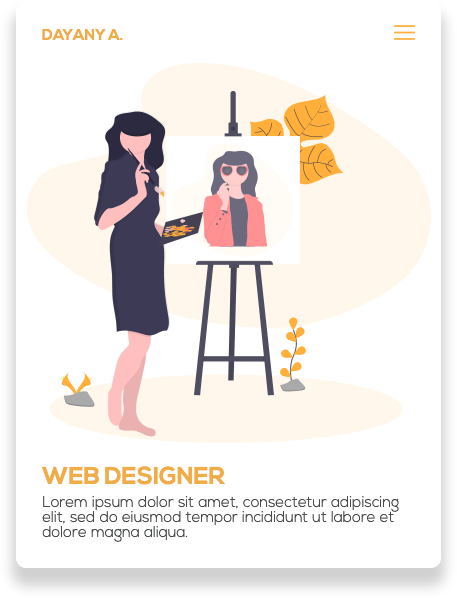
<style>
.page{position:relative;width:457px;height:598px;background:#ffffff}
.page>*{position:absolute;margin:0}
.t1{font:15px "NexaBold";color:#f0ad46}
.t2{font:24px "NexaBold";color:#f0ad46}
.t3{font:15px/15px "NexaLight";color:#484b4d}
</style>
<div class="page">
<p class="t1" style="left:42px;top:29px;width:81px;height:12px">DAYANY A.</p>
<p class="t2" style="left:42px;top:466px;width:183px;height:19px">WEB DESIGNER</p>
<p class="t3" style="left:42px;top:496px;width:357px;height:46px">Lorem ipsum dolor sit amet, consectetur adipiscing elit, sed do eiusmod tempor incididunt ut labore et dolore magna aliqua.</p>
</div>
